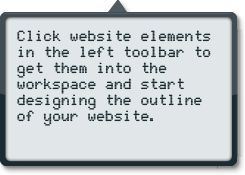
<style>
.page{position:relative;width:245px;height:175px;background:#e1e7e8}
.page>*{position:absolute;margin:0}
.t1{font:24.2px/16px "JD-LCD-Rounded";color:#1b2b32;font-weight:bold;scale:0.91 1}
</style>
<div class="page">
<p class="t1" style="left:17px;top:30px;width:194px;height:96px">Click website elements in the left toolbar to get them into the workspace and start designing the outline of your website.</p>
</div>
